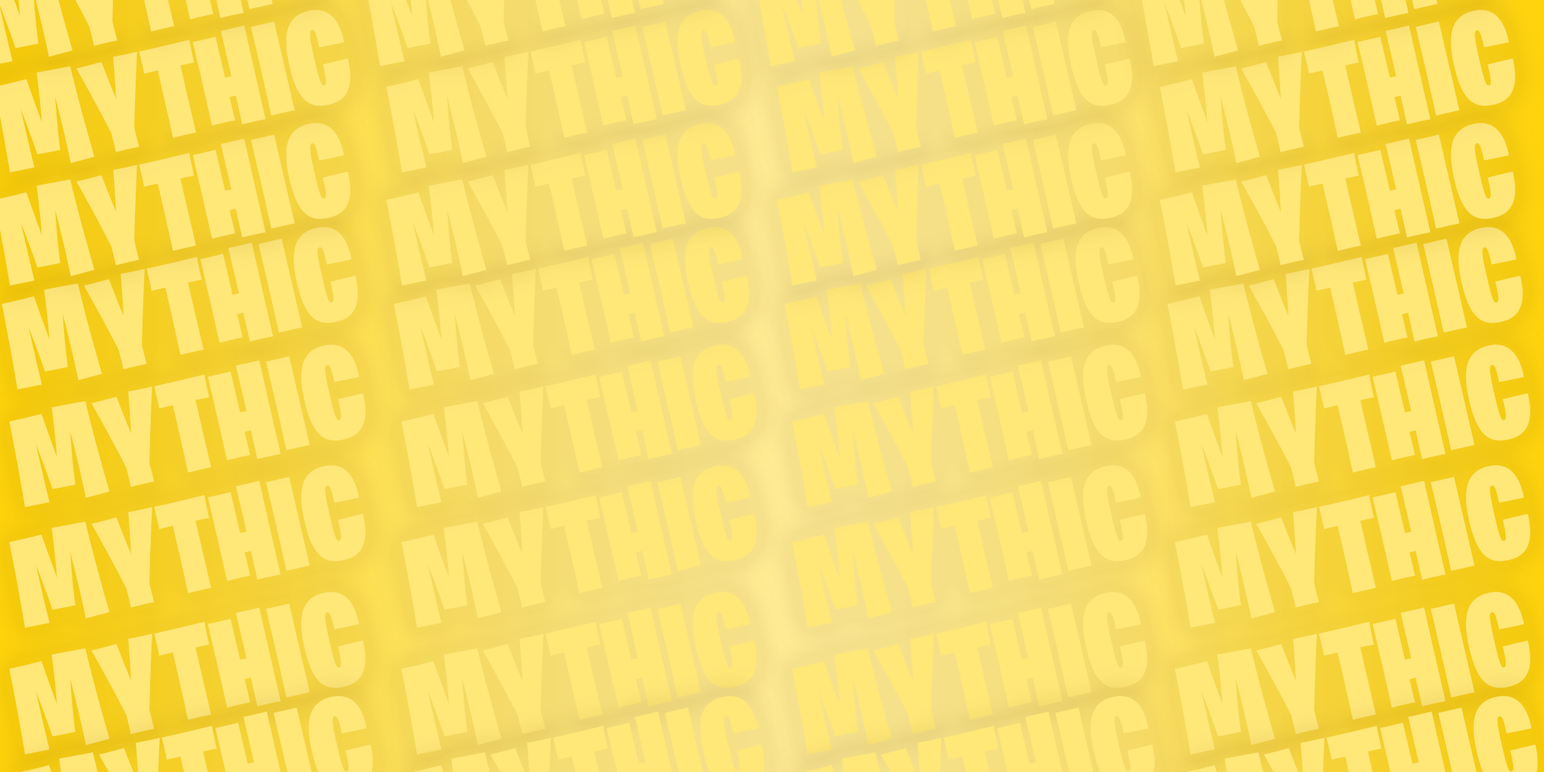
<style>
.page{position:relative;width:1544px;height:772px;background:#ffe778}
.page>*{position:absolute;margin:0}
.t1{font:130.7px "BurbankBigCondensed-Black";color:#ffe778}
</style>
<div class="page">
<p class="t1" style="left:386px;top:10px;width:356px;height:163px;rotate:-13deg">MYTHIC</p>
<p class="t1" style="left:777px;top:10px;width:356px;height:163px;rotate:-13deg">MYTHIC</p>
<p class="t1" style="left:1160px;top:10px;width:356px;height:163px;rotate:-13deg">MYTHIC</p>
<p class="t1" style="left:386px;top:123px;width:356px;height:163px;rotate:-13deg">MYTHIC</p>
<p class="t1" style="left:777px;top:123px;width:356px;height:163px;rotate:-13deg">MYTHIC</p>
<p class="t1" style="left:1160px;top:123px;width:356px;height:163px;rotate:-13deg">MYTHIC</p>
<p class="t1" style="left:2px;top:227px;width:356px;height:163px;rotate:-13deg">MYTHIC</p>
<p class="t1" style="left:394px;top:227px;width:356px;height:163px;rotate:-13deg">MYTHIC</p>
<p class="t1" style="left:784px;top:227px;width:356px;height:163px;rotate:-13deg">MYTHIC</p>
<p class="t1" style="left:1167px;top:227px;width:356px;height:163px;rotate:-13deg">MYTHIC</p>
<p class="t1" style="left:9px;top:345px;width:357px;height:162px;rotate:-13deg">MYTHIC</p>
<p class="t1" style="left:401px;top:345px;width:356px;height:162px;rotate:-13deg">MYTHIC</p>
<p class="t1" style="left:792px;top:345px;width:356px;height:162px;rotate:-13deg">MYTHIC</p>
<p class="t1" style="left:1175px;top:345px;width:356px;height:162px;rotate:-13deg">MYTHIC</p>
<p class="t1" style="left:9px;top:465px;width:357px;height:163px;rotate:-13deg">MYTHIC</p>
<p class="t1" style="left:401px;top:465px;width:356px;height:163px;rotate:-13deg">MYTHIC</p>
<p class="t1" style="left:792px;top:465px;width:356px;height:163px;rotate:-13deg">MYTHIC</p>
<p class="t1" style="left:1175px;top:465px;width:356px;height:163px;rotate:-13deg">MYTHIC</p>
<p class="t1" style="left:9px;top:592px;width:357px;height:163px;rotate:-13deg">MYTHIC</p>
<p class="t1" style="left:401px;top:592px;width:356px;height:163px;rotate:-13deg">MYTHIC</p>
<p class="t1" style="left:792px;top:592px;width:356px;height:163px;rotate:-13deg">MYTHIC</p>
<p class="t1" style="left:1175px;top:592px;width:356px;height:163px;rotate:-13deg">MYTHIC</p>
</div>
